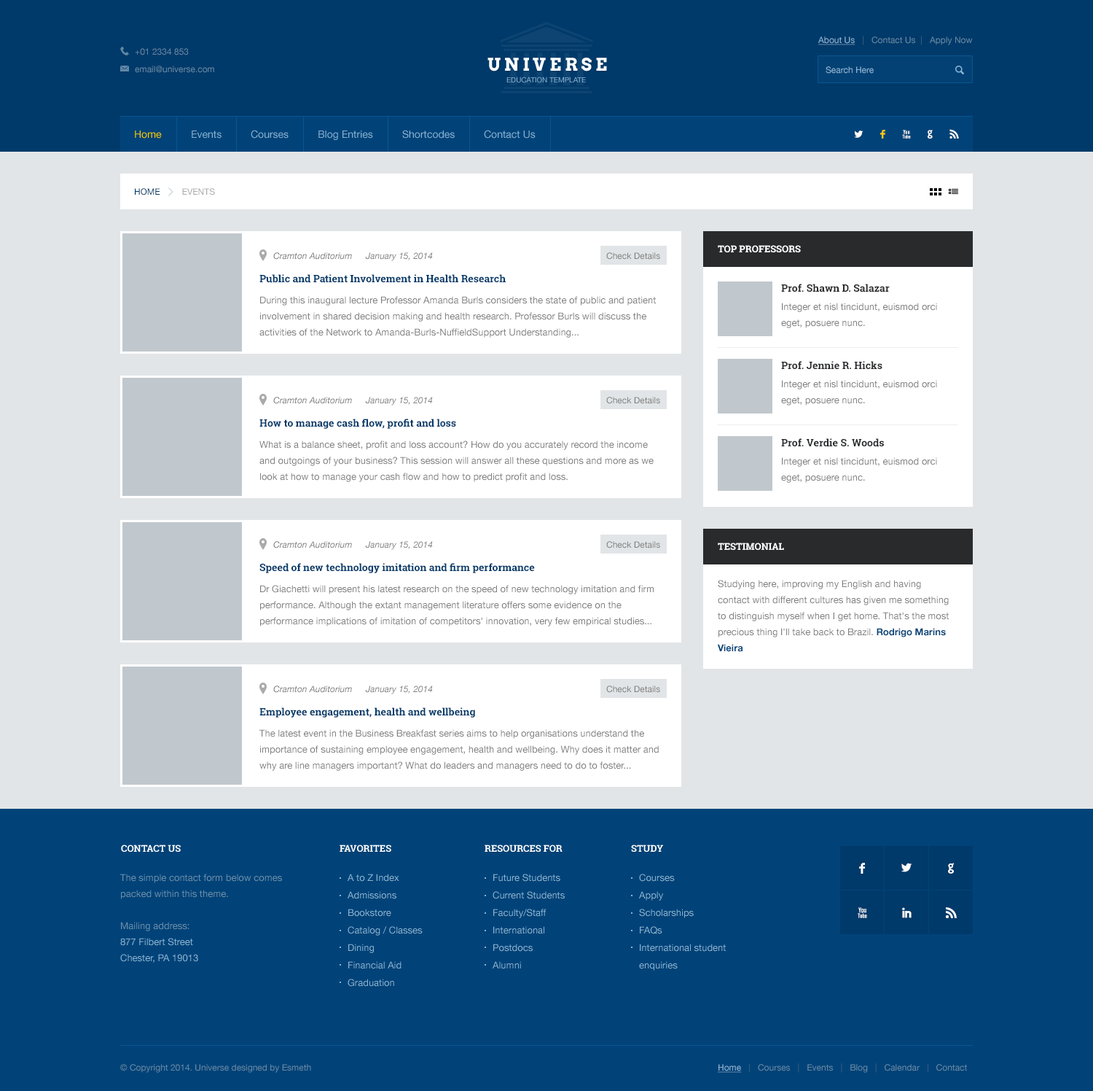
<style>
.page{position:relative;width:1093px;height:1091px;background:#014379}
.page>*{position:absolute;margin:0}
.t1{font:8.7px "HelveticaNeue";color:#6289a7}
.t2{font:8.7px "HelveticaNeue";color:#8ab5d6;text-decoration:underline}
.t3{font:8.7px "HelveticaNeue";color:#44647c}
.t4{font:17.5px "Arvo-Bold";letter-spacing:0.2em;color:#ffffff}
.t5{font:7.3px "HelveticaNeue";color:#8ab5d6}
.t6{font:8.7px "HelveticaNeue";color:#8ab5d6}
.t7{font:10.2px "HelveticaNeue";color:#fecd0b}
.t8{font:10.2px "HelveticaNeue";color:#8ab5d6}
.t9{font:14.6px "Socialico";letter-spacing:1.1em;color:#ffffff}
.t10{font:14.6px "Socialico";letter-spacing:1.1em;color:#fecd0b}
.t11{font:8.7px "HelveticaNeue";color:#aaaaaa}
.t12{font:8.7px "HelveticaNeue";color:#003a6a}
.t13{font:9.5px "RobotoSlab-Bold";color:#ffffff;text-transform:uppercase}
.t14{font:8.7px "HelveticaNeue-Italic";color:#808080}
.t15{font:8.7px "HelveticaNeue";color:#808080}
.t16{font:10.2px "RobotoSlab-Bold";color:#003a6a}
.t17{font:10.2px "RobotoSlab-Bold";color:#282a2c}
.t18{font:9.5px/16px "HelveticaNeue";color:#808080}
.t19{font:9.5px/16px "HelveticaNeue-Bold";color:#014379}
.t20{font:17.5px "Socialico";color:#ffffff;text-transform:uppercase}
.t21{font:9.5px/16px "HelveticaNeue";color:#6b90ad}
.t22{font:9.5px/16px "HelveticaNeue";color:#8ab5d6}
.t23{font:9.5px/17.5px "HelveticaNeue";color:#8ab5d6}
</style>
<div class="page">
<p class="t1" style="left:819px;top:36px;width:154px;height:9px"><span class="t2">About Us  </span><span class="t3"> |   </span>Contact Us <span class="t3"> | </span>  Apply Now</p>
<p class="t1" style="left:135px;top:48px;width:54px;height:7px">+01 2334 853</p>
<p class="t1" style="left:135px;top:66px;width:79px;height:7px">email@universe.com</p>
<p class="t4" style="left:488px;top:58px;width:119px;height:13px">UNIVERSE</p>
<p class="t5" style="left:507px;top:77px;width:79px;height:6px">EDUCATION TEMPLATE</p>
<p class="t6" style="left:826px;top:66px;width:48px;height:8px">Search Here</p>
<p class="t7" style="left:135px;top:130px;width:27px;height:9px">Home</p>
<p class="t8" style="left:192px;top:130px;width:30px;height:9px">Events</p>
<p class="t8" style="left:251px;top:130px;width:38px;height:9px">Courses</p>
<p class="t8" style="left:319px;top:130px;width:54px;height:10px">Blog Entries</p>
<p class="t8" style="left:402px;top:130px;width:53px;height:9px">Shortcodes</p>
<p class="t8" style="left:484px;top:130px;width:52px;height:9px">Contact Us</p>
<p class="t9" style="left:854px;top:129px;width:105px;height:10px">L<span class="t10">F</span>XGR</p>
<p class="t11" style="left:135px;top:188px;width:80px;height:7px"><span class="t12">HOME         </span>EVENTS</p>
<p class="t13" style="left:718px;top:245px;width:83px;height:8px">top professors</p>
<p class="t14" style="left:273px;top:252px;width:79px;height:8px">Cramton Auditorium</p>
<p class="t14" style="left:365px;top:252px;width:68px;height:9px">January 15, 2014</p>
<p class="t15" style="left:606px;top:252px;width:54px;height:8px">Check Details</p>
<p class="t16" style="left:260px;top:274px;width:246px;height:9px">Public and Patient Involvement in Health Research</p>
<p class="t17" style="left:781px;top:284px;width:109px;height:8px">Prof. Shawn D. Salazar</p>
<p class="t18" style="left:260px;top:296px;width:396px;height:42px">During this inaugural lecture Professor Amanda Burls considers the state of public and patient involvement in shared decision making and health research. Professor Burls will discuss the activities of the Network to Amanda-Burls-NuffieldSupport Understanding...</p>
<p class="t18" style="left:781px;top:303px;width:156px;height:25px">Integer et nisl tincidunt, euismod orci eget, posuere nunc.</p>
<p class="t17" style="left:781px;top:361px;width:102px;height:9px">Prof. Jennie R. Hicks</p>
<p class="t18" style="left:781px;top:380px;width:156px;height:25px">Integer et nisl tincidunt, euismod orci eget, posuere nunc.</p>
<p class="t14" style="left:273px;top:397px;width:79px;height:7px">Cramton Auditorium</p>
<p class="t14" style="left:365px;top:397px;width:68px;height:8px">January 15, 2014</p>
<p class="t15" style="left:606px;top:397px;width:54px;height:7px">Check Details</p>
<p class="t16" style="left:260px;top:418px;width:196px;height:11px">How to manage cash flow, profit and loss</p>
<p class="t18" style="left:260px;top:440px;width:394px;height:42px">What is a balance sheet, profit and loss account? How do you accurately record the income and outgoings of your business? This session will answer all these questions and more as we look at how to manage your cash flow and how to predict profit and loss.</p>
<p class="t17" style="left:781px;top:438px;width:103px;height:9px">Prof. Verdie S. Woods</p>
<p class="t18" style="left:781px;top:457px;width:156px;height:26px">Integer et nisl tincidunt, euismod orci eget, posuere nunc.</p>
<p class="t14" style="left:273px;top:541px;width:79px;height:7px">Cramton Auditorium</p>
<p class="t14" style="left:365px;top:541px;width:68px;height:9px">January 15, 2014</p>
<p class="t15" style="left:606px;top:541px;width:54px;height:7px">Check Details</p>
<p class="t13" style="left:718px;top:542px;width:66px;height:8px">Testimonial</p>
<p class="t16" style="left:260px;top:563px;width:275px;height:10px">Speed of new technology imitation and firm performance</p>
<p class="t18" style="left:718px;top:580px;width:231px;height:72px">Studying here, improving my English and having contact with different cultures has given me something to distinguish myself when I get home. That's the most precious thing I'll take back to Brazil. <span class="t19">Rodrigo Marins Vieira</span></p>
<p class="t18" style="left:260px;top:585px;width:394px;height:41px">Dr Giachetti will present his latest research on the speed of new technology imitation and firm performance. Although the extant management literature offers some evidence on the performance implications of imitation of competitors' innovation, very few empirical studies...</p>
<p class="t14" style="left:273px;top:685px;width:79px;height:8px">Cramton Auditorium</p>
<p class="t14" style="left:365px;top:685px;width:68px;height:9px">January 15, 2014</p>
<p class="t15" style="left:606px;top:685px;width:54px;height:8px">Check Details</p>
<p class="t16" style="left:260px;top:707px;width:215px;height:10px">Employee engagement, health and wellbeing</p>
<p class="t18" style="left:260px;top:729px;width:399px;height:42px">The latest event in the Business Breakfast series aims to help organisations understand the importance of sustaining employee engagement, health and wellbeing. Why does it matter and why are line managers important? What do leaders and managers need to do to foster...</p>
<p class="t13" style="left:121px;top:844px;width:60px;height:8px">Contact us</p>
<p class="t13" style="left:340px;top:844px;width:51px;height:8px">favorites</p>
<p class="t13" style="left:485px;top:844px;width:78px;height:8px">resources for</p>
<p class="t13" style="left:631px;top:844px;width:32px;height:8px">STUDY</p>
<p class="t20" style="left:859px;top:862px;width:6px;height:11px">F</p>
<p class="t20" style="left:902px;top:862px;width:10px;height:10px">L</p>
<p class="t20" style="left:948px;top:862px;width:6px;height:11px">G</p>
<p class="t21" style="left:120px;top:873px;width:162px;height:89px">The simple contact form below comes packed within this theme. <br><br>Mailing address:<br><span class="t22">877 Filbert Street<br>Chester, PA 19013</span></p>
<p class="t23" style="left:348px;top:873px;width:75px;height:113px">A to Z Index<br>Admissions<br>Bookstore<br>Catalog / Classes<br>Dining<br>Financial Aid<br>Graduation</p>
<p class="t23" style="left:493px;top:873px;width:72px;height:96px">Future Students<br>Current Students<br>Faculty/Staff<br>International<br>Postdocs<br>Alumni</p>
<p class="t23" style="left:639px;top:873px;width:87px;height:97px">Courses<br>Apply<br>Scholarships<br>FAQs<br>International student enquiries</p>
<p class="t20" style="left:858px;top:907px;width:9px;height:11px">X</p>
<p class="t20" style="left:902px;top:907px;width:10px;height:11px">I</p>
<p class="t20" style="left:946px;top:907px;width:11px;height:11px">R</p>
<p class="t1" style="left:120px;top:1064px;width:191px;height:8px">© Copyright 2014. Universe designed by Esmeth</p>
<p class="t1" style="left:718px;top:1063px;width:249px;height:9px"><span class="t2">Home  </span><span class="t3"> |   </span>Courses  <span class="t3"> | </span>  Events  <span class="t3"> | </span>  Blog  <span class="t3"> | </span>  Calendar  <span class="t3"> | </span>  Contact</p>
</div>
